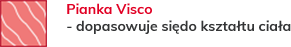
<style>
.page{position:relative;width:291px;height:47px;background:#ffffff}
.page>*{position:absolute;margin:0}
.t1{font:14px "Muli-Bold";color:#343536}
.t2{font:14px "Muli-Bold";color:#e10024}
</style>
<div class="page">
<p class="t1" style="left:67px;top:3px;width:224px;height:31px"><span class="t2">Pianka Visco <br></span>- dopasowuje siędo kształtu ciała</p>
</div>
